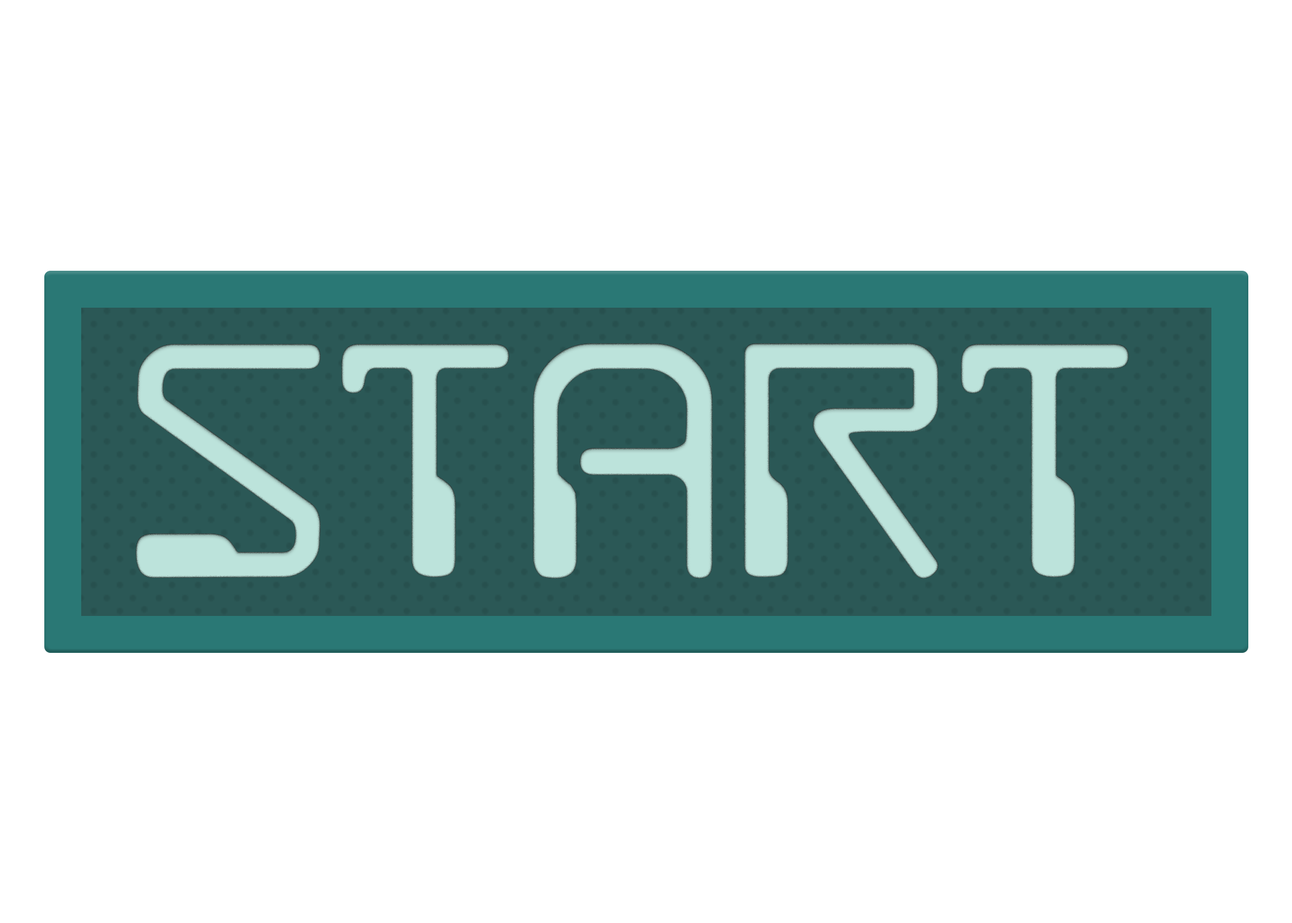
<style>
.page{position:relative;width:1292px;height:923px;background:#ffffff}
.page>*{position:absolute;margin:0}
.t1{font:333.3px "DestructoBeamBB";color:#bce3db}
</style>
<div class="page">
<p class="t1" style="left:135px;top:343px;width:994px;height:235px">START</p>
</div>
